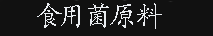
<style>
.page{position:relative;width:213px;height:36px;background:#111111}
.page>*{position:absolute;margin:0}
.t1{font:28px "STKaiti";letter-spacing:-0.075em;color:#eaedf1}
.t2{font:28px "STKaiti";letter-spacing:-0.15em;color:#eaedf1}
</style>
<div class="page">
<p class="t1" style="left:37px;top:3px;width:125px;height:26px"><span class="t2">食</span>用菌原料</p>
</div>
